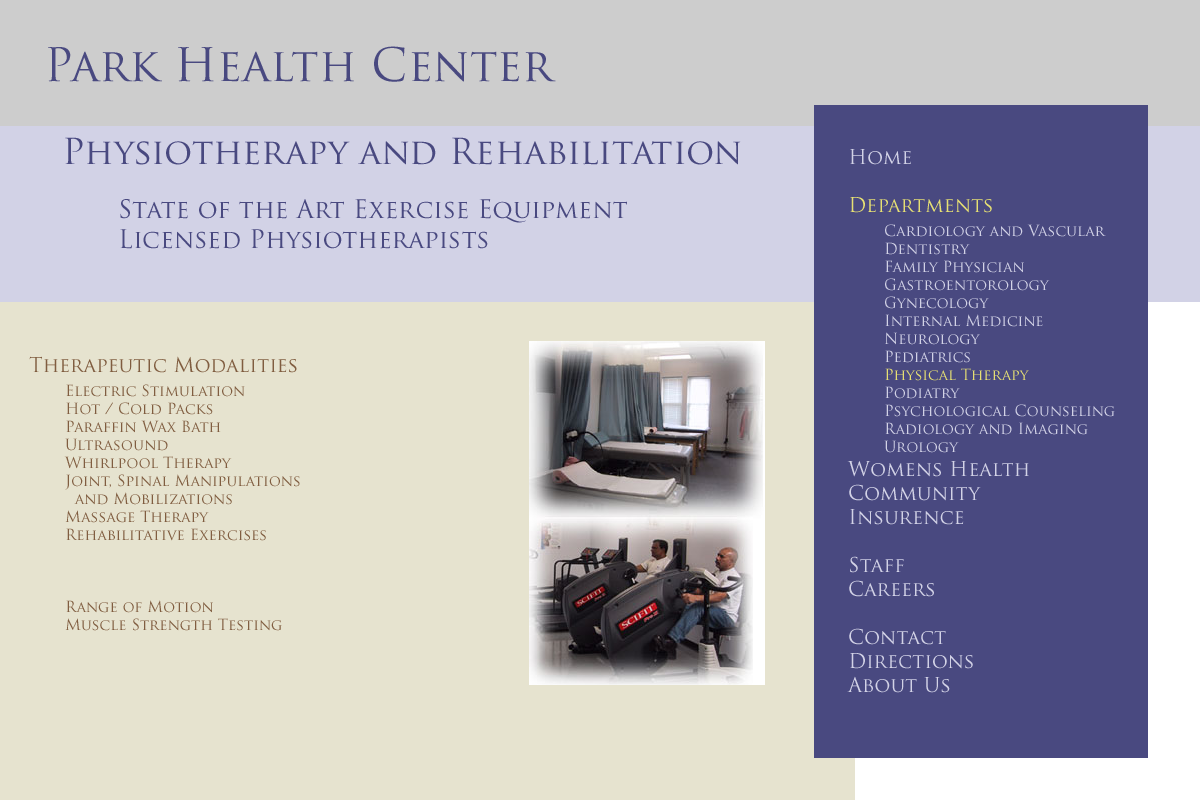
<style>
.page{position:relative;width:1200px;height:800px;background:#e6e3cf}
.page>*{position:absolute;margin:0}
.t1{font:45px "TrajanPro-Regular";color:#494980}
.t2{font:35px "TrajanPro-Regular";color:#494980}
.t3{font:15px "TrajanPro-Regular";color:#d2d2e6}
.t4{font:20px "TrajanPro-Regular";color:#d2d2e6}
.t5{font:20px "TrajanPro-Regular";color:#e6e073}
.t6{font:15px "TrajanPro-Regular";color:#e6e073}
.t7{font:25px "TrajanPro-Regular";color:#494980}
.t8{font:15px "TrajanPro-Regular";color:#805d40}
.t9{font:20px "TrajanPro-Regular";color:#805d40}
</style>
<div class="page">
<p class="t1" style="left:48px;top:46px;width:508px;height:36px">Park Health Center</p>
<p class="t2" style="left:65px;top:137px;width:676px;height:28px">Physiotherapy and Rehabilitation</p>
<p class="t3" style="left:847px;top:149px;width:268px;height:544px"><span class="t4">Home<br><br></span><span class="t5">Departments<br> </span>Cardiology and Vascular<br> Dentistry<br> Family Physician<br> Gastroentorology<br> Gynecology<br> Internal Medicine<br> Neurology<br> Pediatrics<br> <span class="t6">Physical Therapy<br> </span>Podiatry<br> Psychological Counseling<br> Radiology and Imaging<br> Urology<br><span class="t4">Womens Health<br>Community<br>Insurence<br><br>Staff<br>Careers<br><br>Contact<br>Directions<br>About Us</span></p>
<p class="t7" style="left:120px;top:199px;width:507px;height:50px">State of the Art Exercise Equipment<br>Licensed Physiotherapists</p>
<p class="t8" style="left:29px;top:356px;width:271px;height:275px"><span class="t9">Therapeutic Modalities<br> </span> Electric Stimulation<br> Hot / Cold Packs<br> Paraffin Wax Bath<br> Ultrasound<br> Whirlpool Therapy<br> Joint, Spinal Manipulations <br>   and Mobilizations<br> Massage Therapy<br> Rehabilitative Exercises<br><br><br><br> Range of Motion<br> Muscle Strength Testing</p>
</div>
